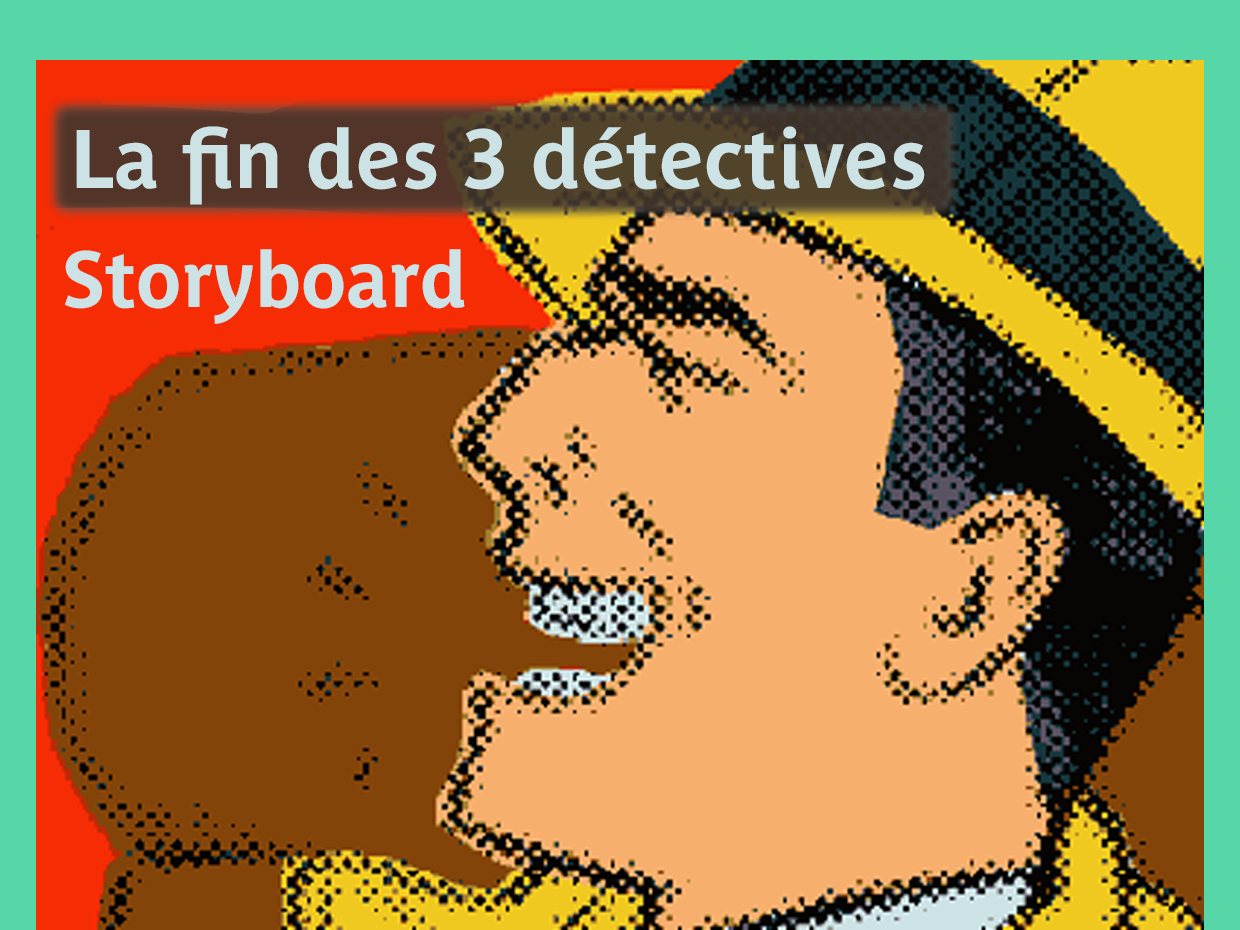
<style>
.page{position:relative;width:1240px;height:930px}
.page>*{position:absolute;margin:0}
.t1{font:82px "ParisinePlusStd-Bold";color:#cde2e4}
.t2{font:78px "ParisinePlusStd-Bold";color:#cde2e4}
</style>
<div class="page">
<p class="t1" style="left:76px;top:126px;width:849px;height:79px">La fin des 3 détectives</p>
<p class="t2" style="left:65px;top:249px;width:400px;height:75px">Storyboard</p>
</div>
